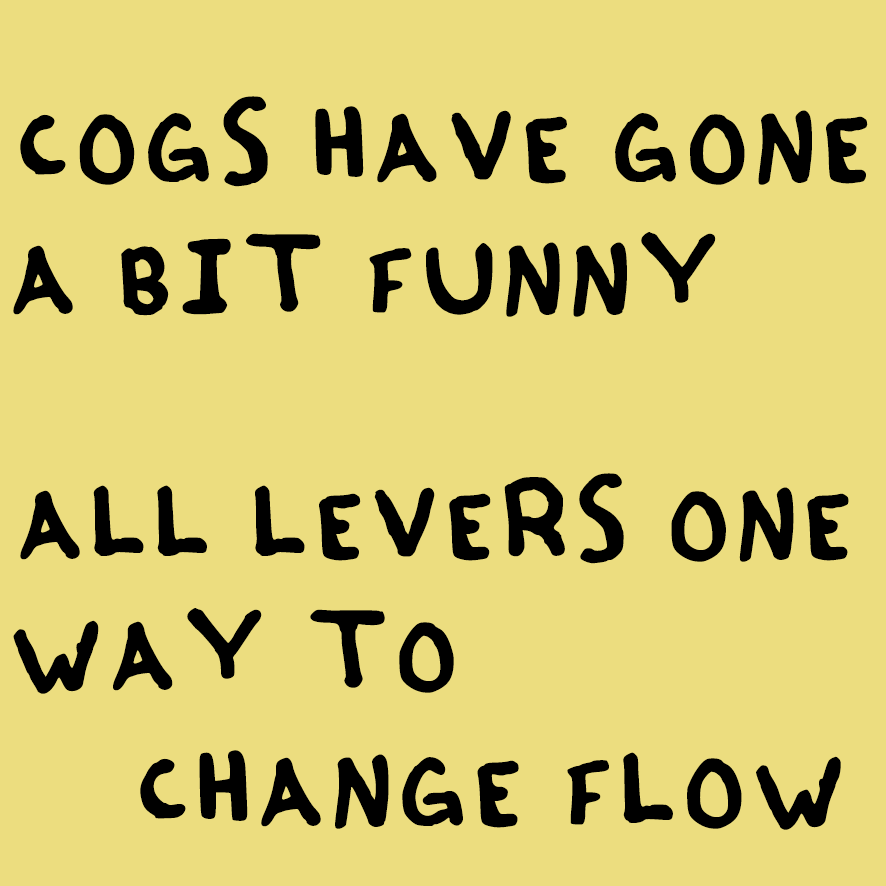
<style>
.page{position:relative;width:886px;height:886px;background:#ecdd7f}
.page>*{position:absolute;margin:0}
.t1{font:136px "Sharpie-Regular";color:#000000}
</style>
<div class="page">
<p class="t1" style="left:20px;top:96px;width:848px;height:91px">COGS HAVE GONE</p>
<p class="t1" style="left:13px;top:232px;width:703px;height:85px">A BIT FUNNY</p>
<p class="t1" style="left:20px;top:473px;width:829px;height:91px">ALL LEVERS ONE</p>
<p class="t1" style="left:13px;top:608px;width:441px;height:86px">WAY TO</p>
<p class="t1" style="left:140px;top:750px;width:701px;height:80px">CHANGE FLOW</p>
</div>
